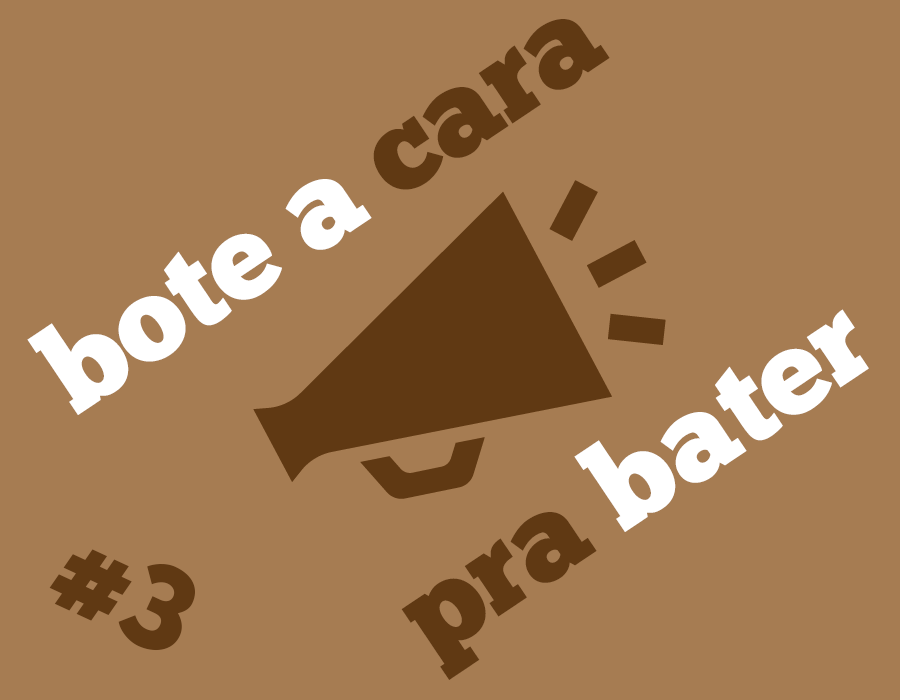
<style>
.page{position:relative;width:900px;height:700px;background:#a67c52}
.page>*{position:absolute;margin:0}
.t1{font:120.7px "ChunkFive-Roman";color:#ffffff}
.t2{font:120.7px "ChunkFive-Roman";color:#603913}
</style>
<div class="page">
<p class="t1" style="left:27px;top:19px;width:583px;height:396px;rotate:-34deg">bote a <span class="t2">cara</span></p>
<p class="t1" style="left:401px;top:309px;width:468px;height:371px;rotate:-34deg"><span class="t2">pra</span> bater</p>
<p class="t2" style="left:49px;top:549px;width:146px;height:102px;rotate:25deg">#3</p>
</div>
